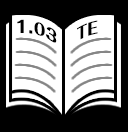
<style>
.page{position:relative;width:128px;height:132px;background:#000000}
.page>*{position:absolute;margin:0}
.t1{font:16px "FolkPro-Heavy";color:#000000}
</style>
<div class="page">
<p class="t1" style="left:17px;top:19px;width:40px;height:24px">1.03</p>
<p class="t1" style="left:77px;top:20px;width:21px;height:20px">TE</p>
</div>
